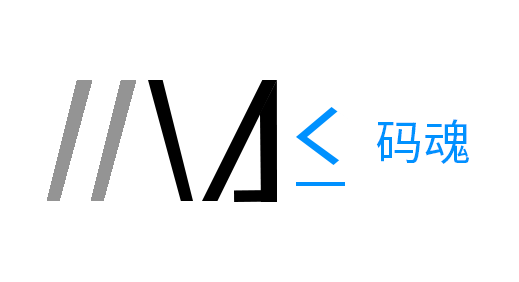
<style>
.page{position:relative;width:519px;height:282px;background:#ffffff}
.page>*{position:absolute;margin:0}
.t1{font:48px "SourceHanSansCN-Regular";color:#0091ff}
</style>
<div class="page">
<p class="t1" style="left:376px;top:119px;width:93px;height:45px">码魂</p>
</div>
